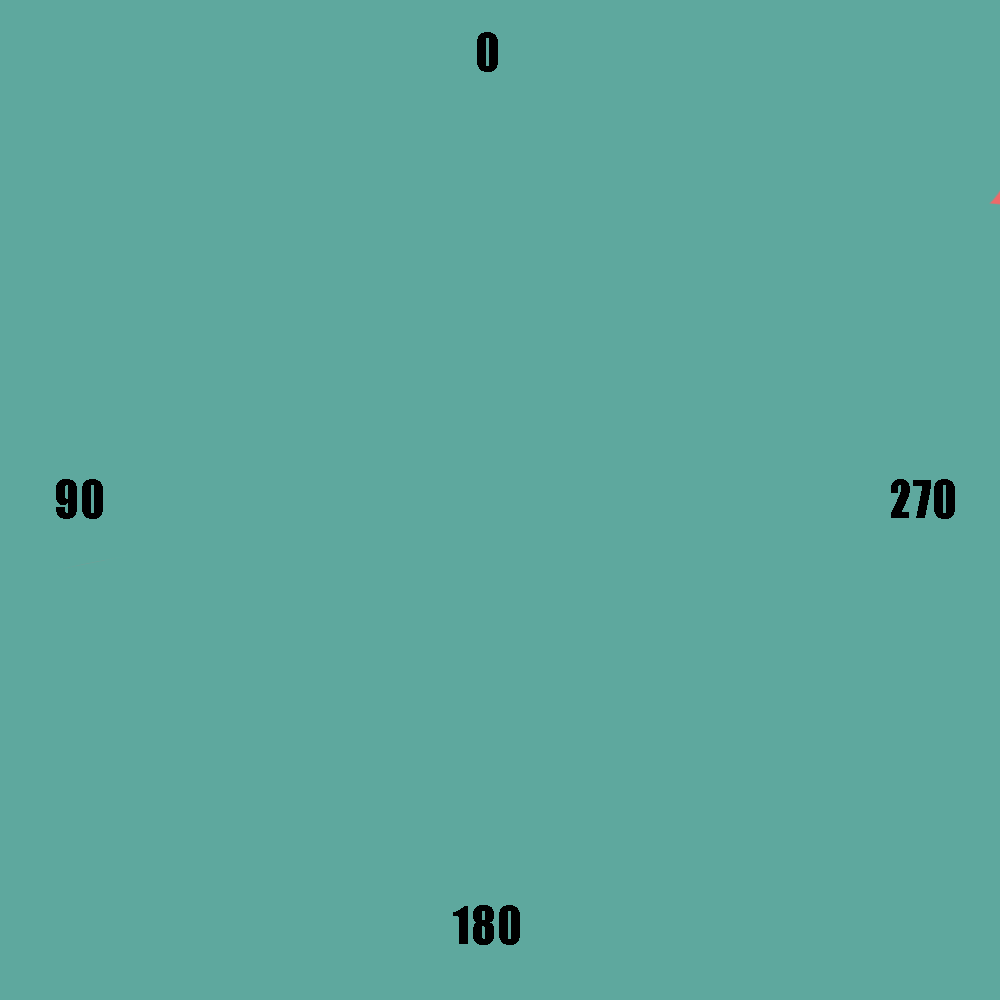
<style>
.page{position:relative;width:1000px;height:1000px;background:#5ea89e}
.page>*{position:absolute;margin:0}
.t1{font:48px "Impact";color:#000000}
</style>
<div class="page">
<p class="t1" style="left:477px;top:32px;width:21px;height:40px">0</p>
<p class="t1" style="left:56px;top:479px;width:47px;height:40px">90</p>
<p class="t1" style="left:891px;top:479px;width:64px;height:40px">270</p>
<p class="t1" style="left:453px;top:905px;width:67px;height:40px">180</p>
</div>
